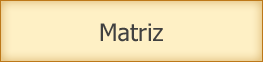
<style>
.page{position:relative;width:263px;height:62px;background:#fef0c5}
.page>*{position:absolute;margin:0}
.t1{font:24px "Tahoma";color:#404040}
</style>
<div class="page">
<p class="t1" style="left:100px;top:23px;width:63px;height:19px">Matriz</p>
</div>
